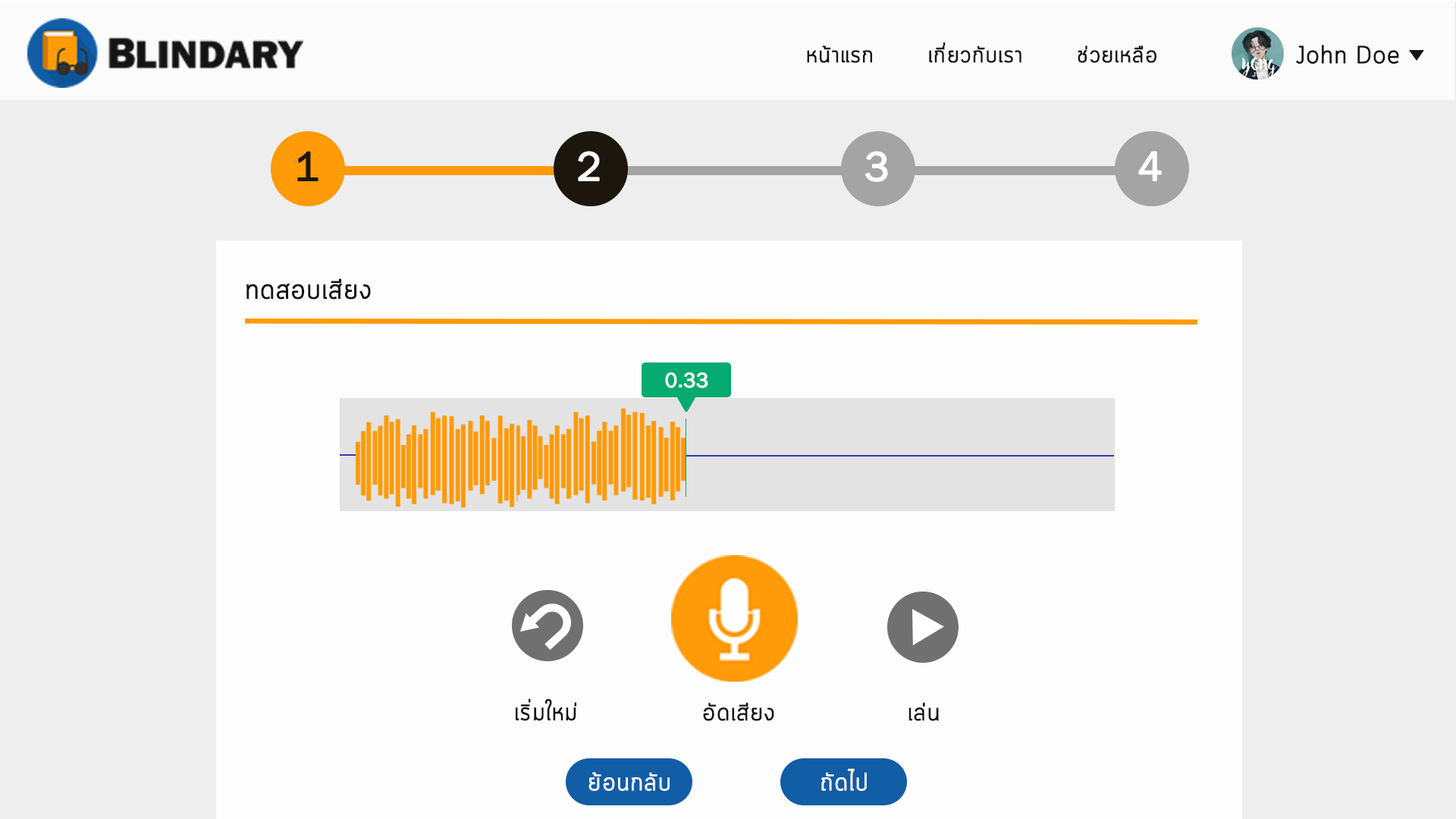
<style>
.page{position:relative;width:1456px;height:819px;background:#fdfdfd}
.page>*{position:absolute;margin:0}
.t1{font:22.7px "Cloud-Light";color:#141414;font-weight:bold}
.t2{font:24.2px "Cloud-Light";color:#141414;font-weight:bold}
.t3{font:42.1px "FranklinGothic-Book";color:#1c160d;font-weight:bold}
.t4{font:42.1px "FranklinGothic-Book";color:#fefefe;font-weight:bold}
.t5{font:42.1px "FranklinGothic-Book";color:#ffffff;font-weight:bold}
.t6{font:27.3px "Cloud-Light";color:#141414;font-weight:bold}
.t7{font:21.2px "FranklinGothic-Book";color:#ffffff;font-weight:bold}
.t8{font:24.6px "Cloud-Light";color:#fefdfd;font-weight:bold}
</style>
<div class="page">
<p class="t1" style="left:807px;top:42px;width:349px;height:21px">หน้าแรก       เกี่ยวกับเรา       ช่วยเหลือ</p>
<p class="t2" style="left:1296px;top:45px;width:103px;height:19px">John Doe</p>
<p class="t3" style="left:297px;top:151px;width:21px;height:30px">1</p>
<p class="t4" style="left:578px;top:151px;width:22px;height:30px">2</p>
<p class="t5" style="left:865px;top:151px;width:23px;height:31px">3</p>
<p class="t5" style="left:1138px;top:151px;width:24px;height:30px">4</p>
<p class="t6" style="left:246px;top:278px;width:125px;height:22px">ทดสอบเสียง</p>
<p class="t7" style="left:665px;top:372px;width:43px;height:16px">0.33</p>
<p class="t2" style="left:516px;top:698px;width:60px;height:23px">เริ่มใหม่</p>
<p class="t2" style="left:703px;top:702px;width:71px;height:19px">อัดเสียง</p>
<p class="t2" style="left:908px;top:702px;width:31px;height:19px">เล่น</p>
<p class="t8" style="left:588px;top:772px;width:82px;height:19px">ย้อนกลับ</p>
<p class="t8" style="left:821px;top:768px;width:46px;height:23px">ถัดไป</p>
</div>
